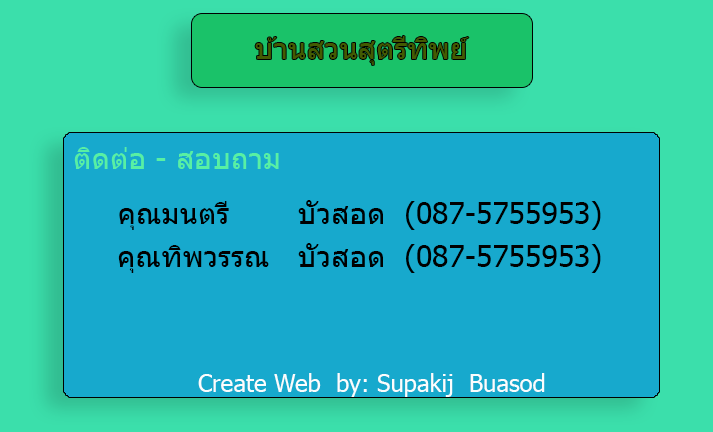
<style>
.page{position:relative;width:713px;height:432px;background:#17a9cd}
.page>*{position:absolute;margin:0}
.t1{font:30px "Tahoma";color:#435b02}
.t2{font:30px "Tahoma";color:#58f0a3}
.t3{font:30px "Tahoma";color:#000000}
.t4{font:24px "Tahoma";color:#fbfdfd}
</style>
<div class="page">
<p class="t1" style="left:255px;top:36px;width:214px;height:29px">บ้านสวนสุตรีทิพย์</p>
<p class="t2" style="left:74px;top:147px;width:205px;height:22px">ติดต่อ - สอบถาม</p>
<p class="t3" style="left:119px;top:200px;width:482px;height:30px">คุณมนตรี     บัวสอด  (087-5755953)</p>
<p class="t3" style="left:118px;top:243px;width:483px;height:30px">คุณทิพวรรณ   บัวสอด  (087-5755953)</p>
<p class="t4" style="left:198px;top:373px;width:347px;height:24px">Create Web  by: Supakij  Buasod</p>
</div>
